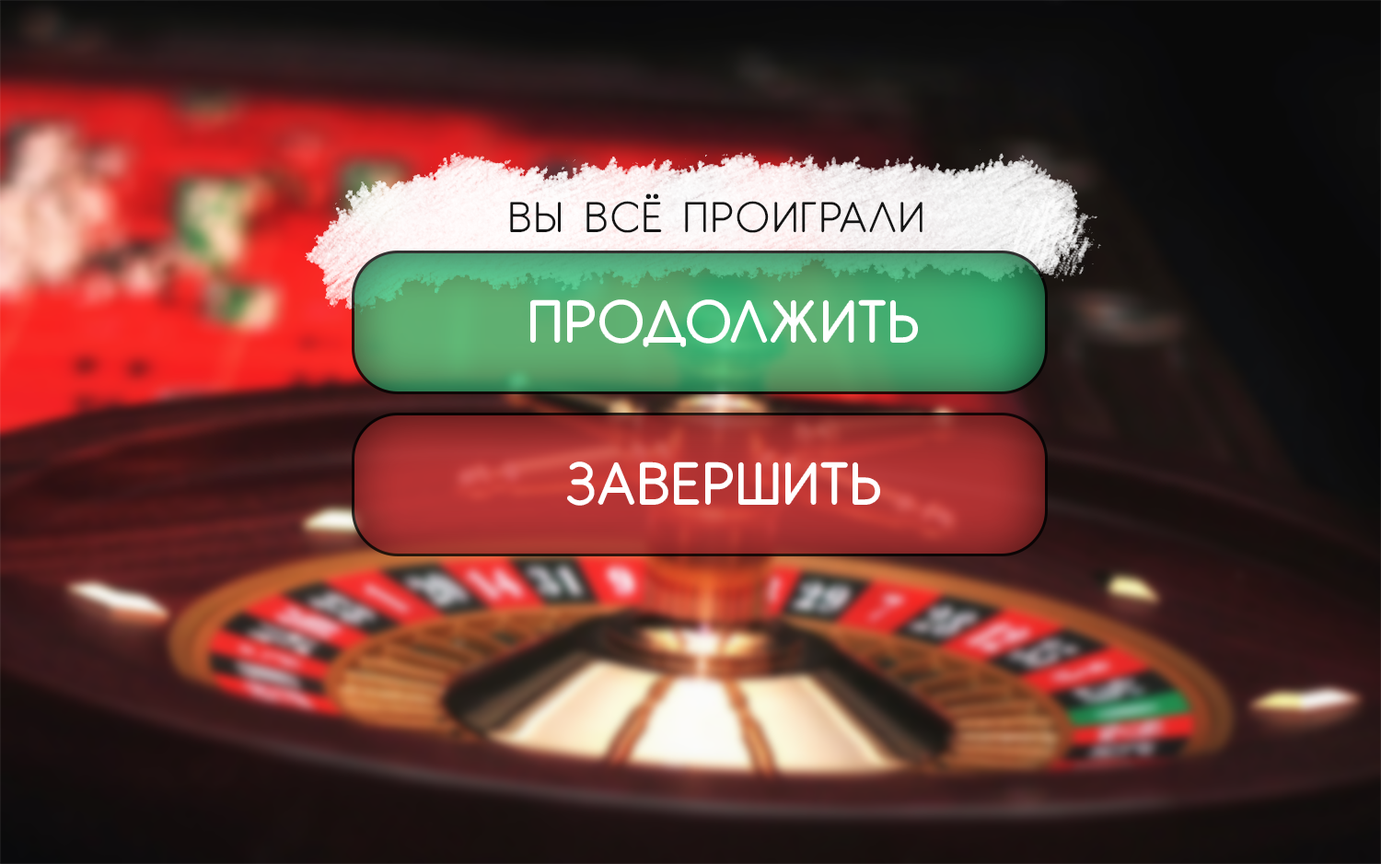
<style>
.page{position:relative;width:1381px;height:864px}
.page>*{position:absolute;margin:0}
.t1{font:41.4px "CM_GARDEN_R";letter-spacing:0.06em;color:#151515;text-transform:uppercase}
.t2{font:55.7px "CM_GARDEN_R";letter-spacing:0.06em;color:#ffffff;text-transform:uppercase}
</style>
<div class="page">
<p class="t1" style="left:510px;top:193px;width:412px;height:40px">вы всё проиграли</p>
<p class="t2" style="left:531px;top:300px;width:386px;height:46px">продолжить</p>
<p class="t2" style="left:568px;top:462px;width:311px;height:42px">ЗАВЕРШИТЬ</p>
</div>
